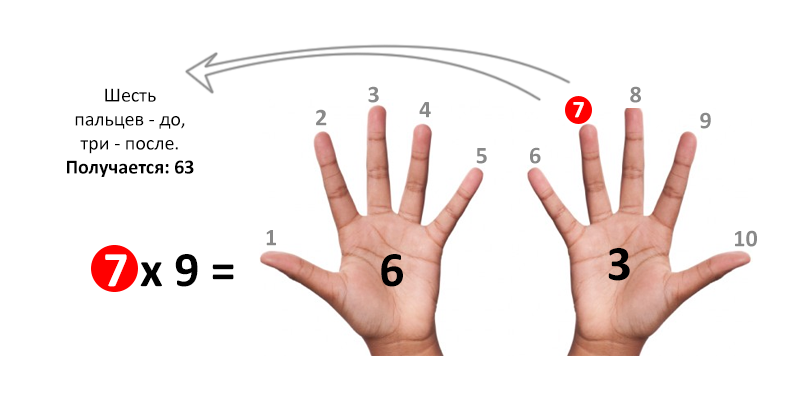
<style>
.page{position:relative;width:800px;height:400px;background:#ffffff}
.page>*{position:absolute;margin:0}
.t1{font:20px "Calibri";color:#000000}
.t2{font:20px "Calibri-Bold";color:#000000}
.t3{font:24px "Calibri-Bold";color:#898989}
.t4{font:24px "Calibri-Bold";color:#ffffff}
.t5{font:50px "Calibri-Bold";color:#000000}
.t6{font:50px "Calibri-Bold";color:#ffffff}
</style>
<div class="page">
<p class="t1" style="left:67px;top:88px;width:127px;height:89px;text-align:center">Шесть <br>пальцев - до,<br>три - после.<br><span class="t2">Получается: 63</span></p>
<p class="t3" style="left:368px;top:86px;width:11px;height:17px">3</p>
<p class="t3" style="left:630px;top:86px;width:11px;height:17px">8</p>
<p class="t3" style="left:419px;top:102px;width:12px;height:16px">4</p>
<p class="t4" style="left:573px;top:102px;width:11px;height:16px">7</p>
<p class="t3" style="left:316px;top:109px;width:11px;height:17px">2</p>
<p class="t3" style="left:700px;top:112px;width:11px;height:17px">9</p>
<p class="t3" style="left:476px;top:148px;width:11px;height:16px">5</p>
<p class="t3" style="left:530px;top:147px;width:11px;height:17px">6</p>
<p class="t3" style="left:266px;top:230px;width:10px;height:16px">1</p>
<p class="t3" style="left:735px;top:230px;width:22px;height:17px">10</p>
<p class="t5" style="left:105px;top:254px;width:129px;height:33px"><span class="t6">7</span> x 9 =</p>
<p class="t5" style="left:381px;top:254px;width:22px;height:33px">6</p>
<p class="t5" style="left:608px;top:248px;width:22px;height:33px">3</p>
</div>
